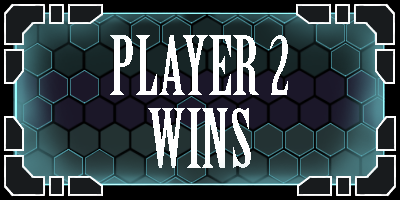
<style>
.page{position:relative;width:400px;height:200px}
.page>*{position:absolute;margin:0}
.t1{font:80px "BirchStd";color:#ffffff}
</style>
<div class="page">
<p class="t1" style="left:110px;top:35px;width:178px;height:60px">PLAYER 2</p>
<p class="t1" style="left:148px;top:108px;width:103px;height:60px">WINS</p>
</div>
